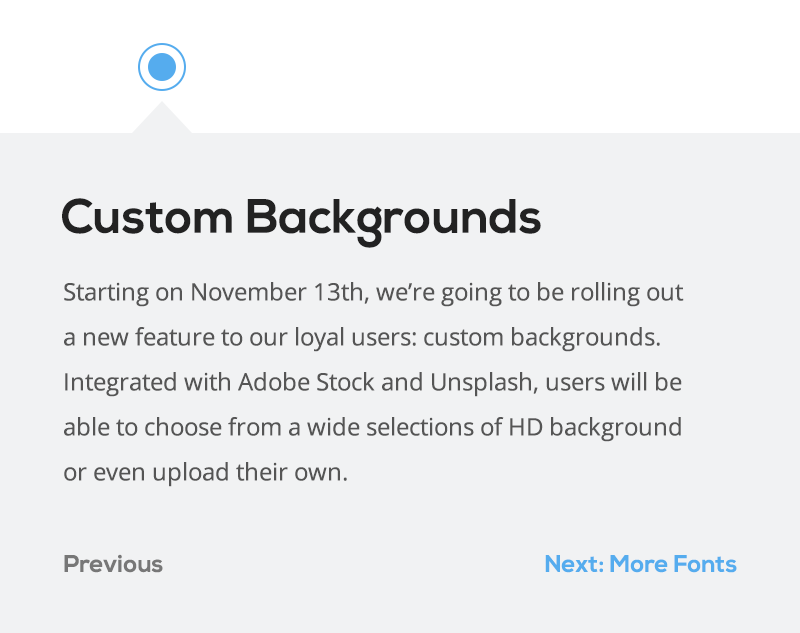
<style>
.page{position:relative;width:800px;height:633px;background:#f1f2f3}
.page>*{position:absolute;margin:0}
.t1{font:48px "NexaBold";color:#222222}
.t2{font:24px/45px "OpenSans";color:#555555}
.t3{font:24px "NexaBold";color:#777777}
.t4{font:24px "NexaBold";color:#55acee}
</style>
<div class="page">
<p class="t1" style="left:62px;top:198px;width:479px;height:50px">Custom Backgrounds</p>
<p class="t2" style="left:64px;top:282px;width:620px;height:205px">Starting on November 13th, we’re going to be rolling out<br>a new feature to our loyal users: custom backgrounds.<br>Integrated with Adobe Stock and Unsplash, users will be<br>able to choose from a wide selections of HD background<br>or even upload their own.</p>
<p class="t3" style="left:64px;top:554px;width:99px;height:19px">Previous</p>
<p class="t4" style="left:545px;top:555px;width:192px;height:18px">Next: More Fonts</p>
</div>
